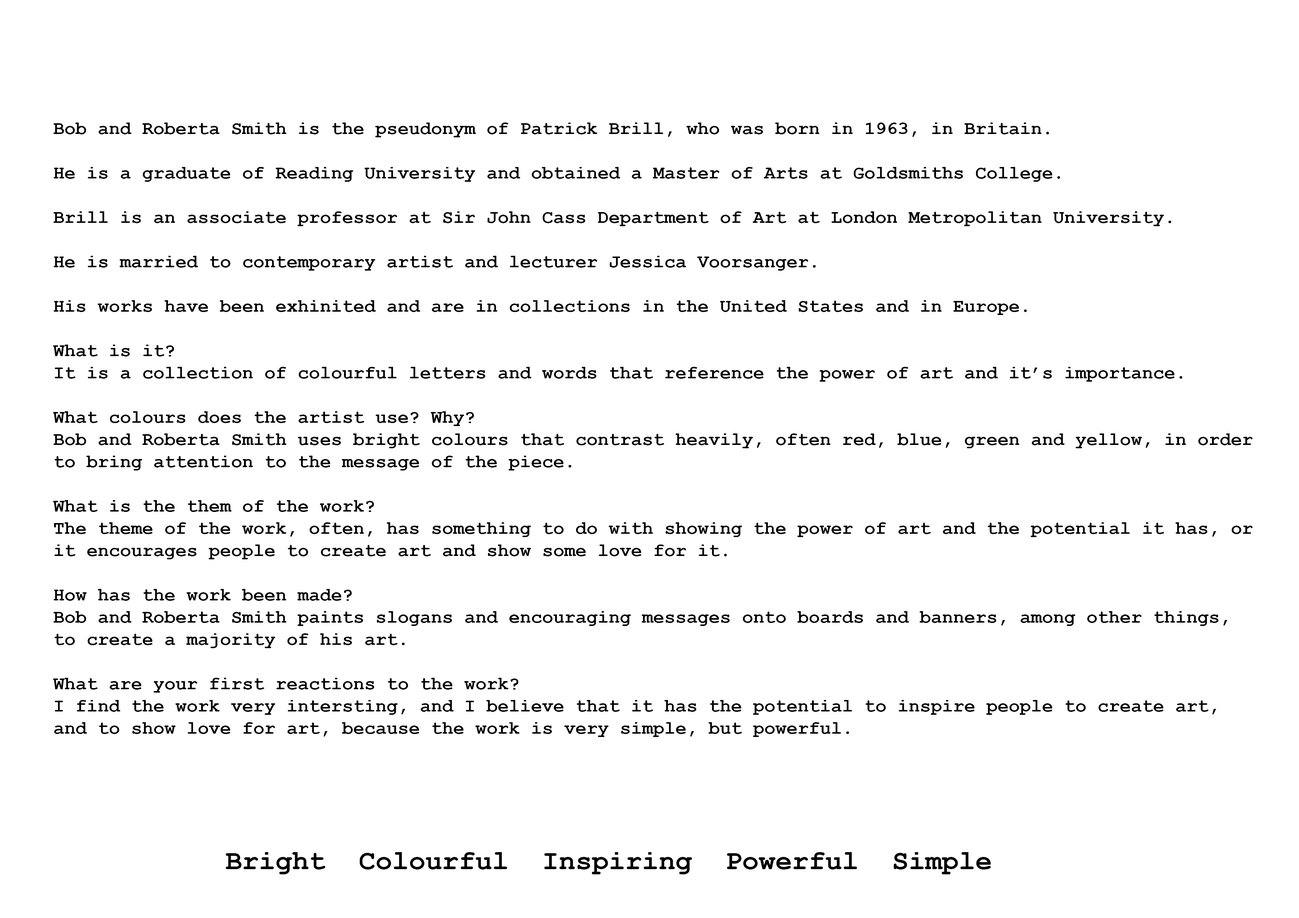
<style>
.page{position:relative;width:1299px;height:918px;background:#ffffff}
.page>*{position:absolute;margin:0}
.t1{font:18.5px "CourierNewPS-BoldMT";color:#000000}
.t2{font:27.8px "CourierNewPS-BoldMT";color:#000000}
</style>
<div class="page">
<p class="t1" style="left:53px;top:123px;width:1199px;height:614px">Bob and Roberta Smith is the pseudonym of Patrick Brill, who was born in 1963, in Britain.<br><br>He is a graduate of Reading University and obtained a Master of Arts at Goldsmiths College.<br><br>Brill is an associate professor at Sir John Cass Department of Art at London Metropolitan University.<br><br>He is married to contemporary artist and lecturer Jessica Voorsanger.<br><br>His works have been exhinited and are in collections in the United States and in Europe.<br><br>What is it?<br>It is a collection of colourful letters and words that reference the power of art and it’s importance.<br><br>What colours does the artist use? Why?<br>Bob and Roberta Smith uses bright colours that contrast heavily, often red, blue, green and yellow, in order to bring attention to the message of the piece.<br><br>What is the them of the work?<br>The theme of the work, often, has something to do with showing the power of art and the potential it has, or it encourages people to create art and show some love for it.<br><br>How has the work been made?<br>Bob and Roberta Smith paints slogans and encouraging messages onto boards and banners, among other things, to create a majority of his art.<br><br>What are your first reactions to the work?<br>I find the work very intersting, and I believe that it has the potential to inspire people to create art, and to show love for art, because the work is very simple, but powerful.</p>
<p class="t2" style="left:226px;top:852px;width:765px;height:22px">Bright  Colourful  Inspiring  Powerful  Simple</p>
</div>
